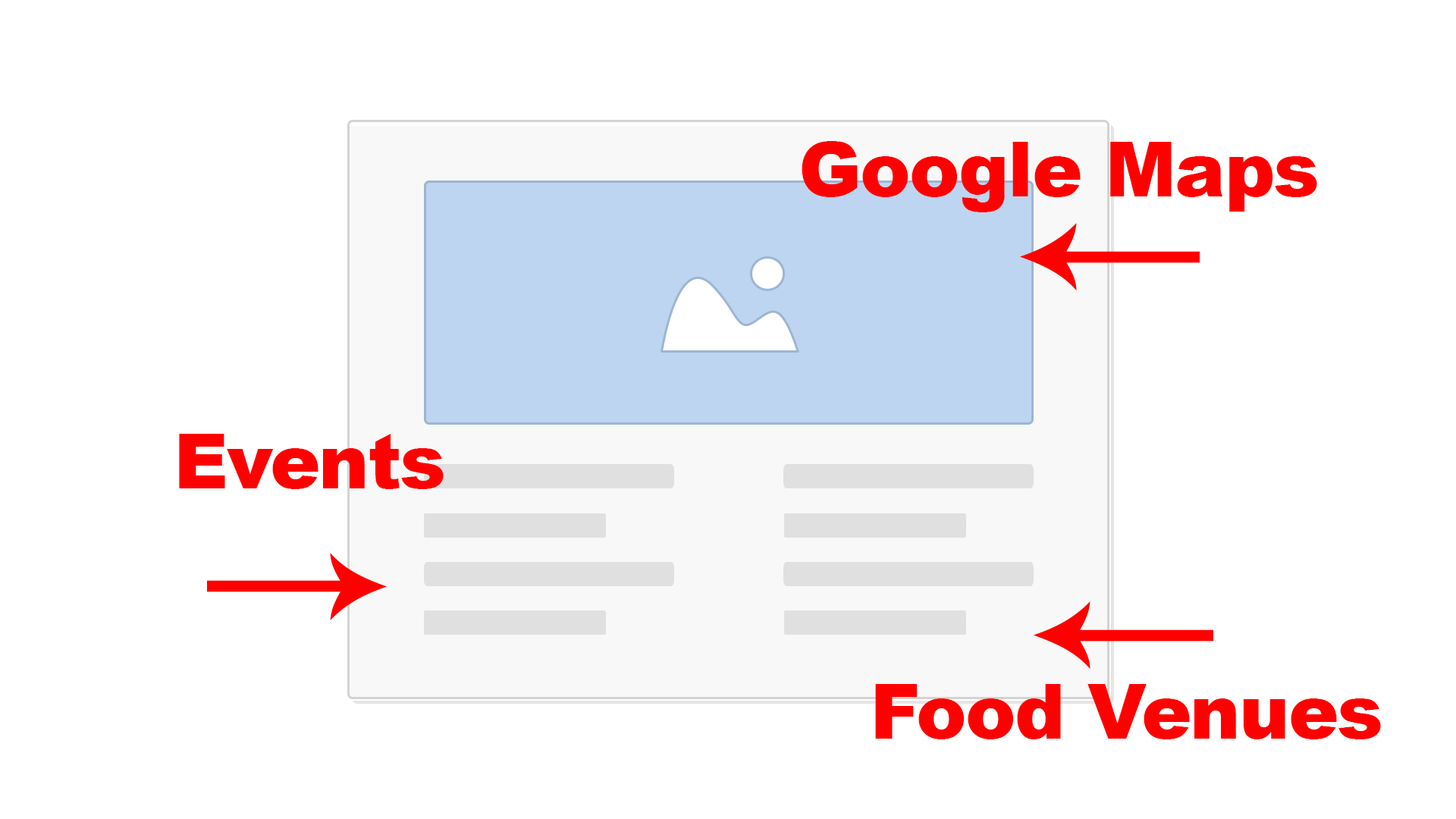
<style>
.page{position:relative;width:1456px;height:819px;background:#ffffff}
.page>*{position:absolute;margin:0}
.t1{font:75.8px "Arial-Black";letter-spacing:-0.02em;color:#ff0000}
</style>
<div class="page">
<p class="t1" style="left:802px;top:141px;width:515px;height:71px">Google Maps</p>
<p class="t1" style="left:179px;top:434px;width:265px;height:55px">Events</p>
<p class="t1" style="left:875px;top:684px;width:506px;height:55px">Food Venues</p>
</div>
